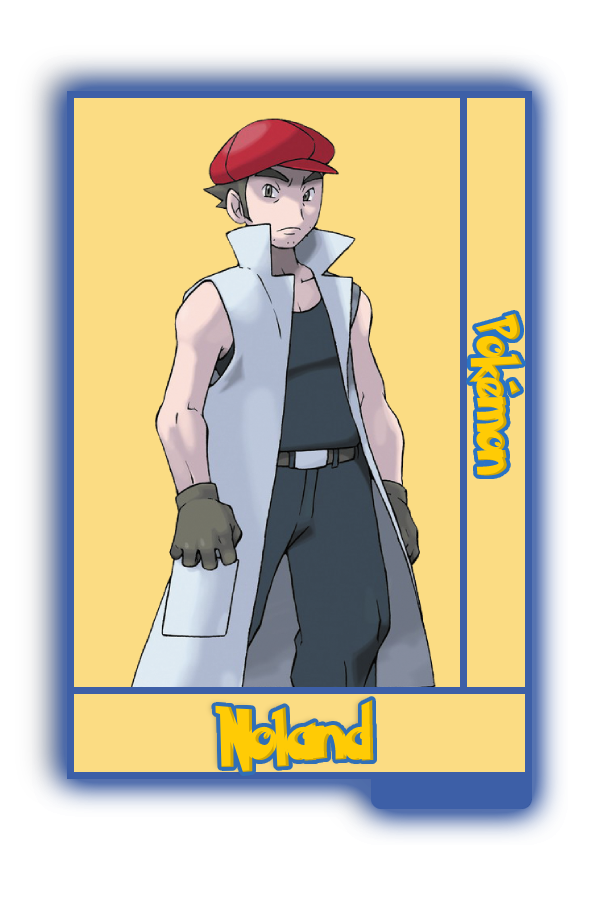
<style>
.page{position:relative;width:600px;height:900px;background:#fbdc83}
.page>*{position:absolute;margin:0}
.t1{font:48.8px "PokemonSolidNormal";color:#ffcb05;scale:0.8 1}
.t2{font:56.6px "PokemonSolidNormal";color:#ffcb05;scale:0.92 1}
</style>
<div class="page">
<p class="t1" style="left:469px;top:313px;width:54px;height:163px;rotate:90deg">Pokémon</p>
<p class="t2" style="left:215px;top:699px;width:159px;height:73px">Noland</p>
</div>
